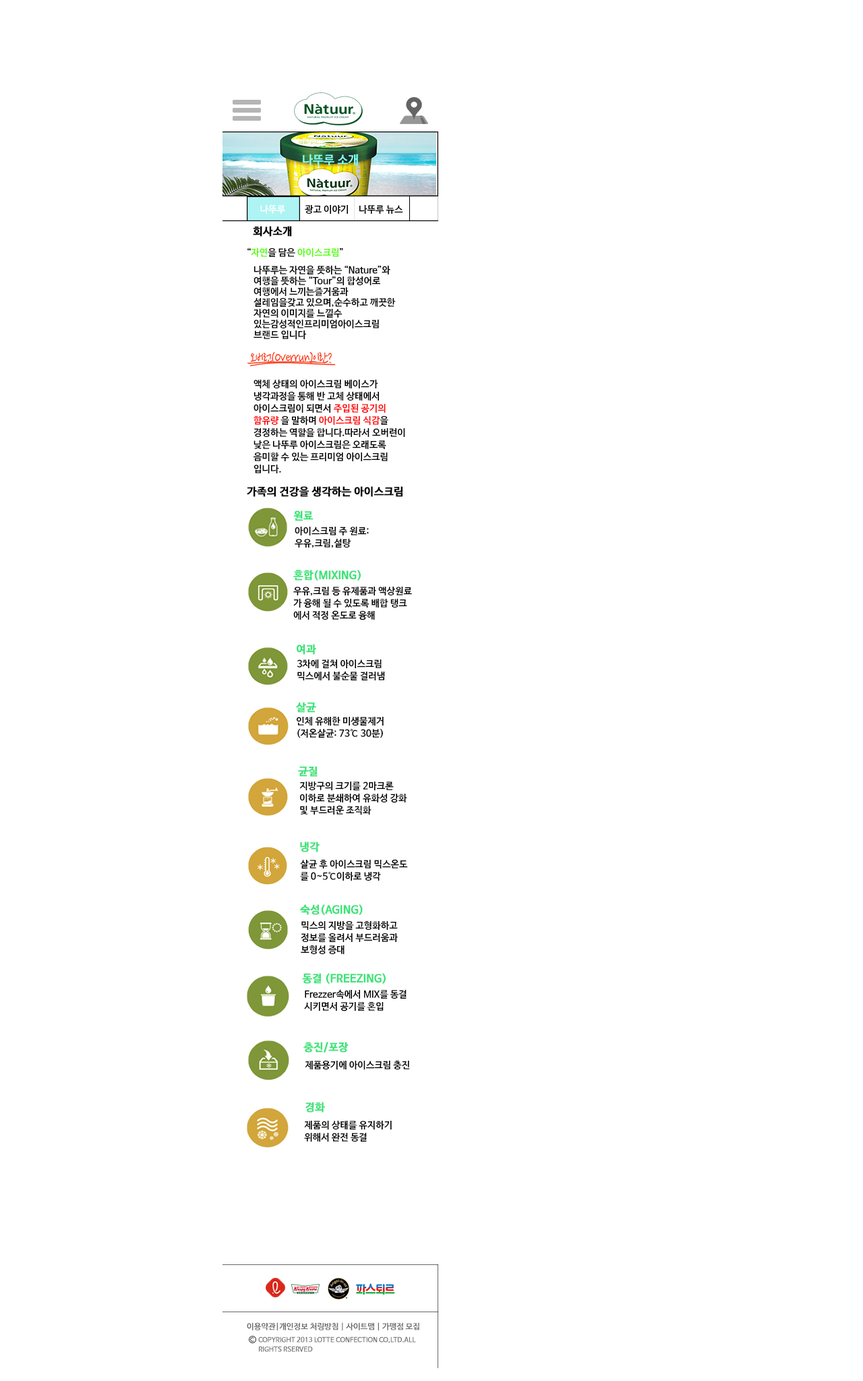
<style>
.page{position:relative;width:863px;height:1381px;background:#ffffff}
.page>*{position:absolute;margin:0}
.t1{font:12.1px "NanumBarunGothicBold";color:#84fff2}
.t2{font:9.4px "NanumBarunGothicBold";color:#ffffff}
.t3{font:9.4px "NanumBarunGothicBold";color:#000000}
.t4{font:10.8px "NanumBarunGothicBold";color:#000000;font-weight:bold}
.t5{font:9.4px "NanumBarunGothicBold";color:#54ff00}
.t6{font:9.4px/10.8px "NanumBarunGothicBold";color:#000000}
.t7{font:9.4px/12.1px "NanumBarunGothicBold";color:#000000}
.t8{font:9.4px/12.1px "NanumBarunGothicBold";color:#ff0000}
.t9{font:10.8px "NanumBarunGothicBold";color:#3de378;font-weight:bold}
.t10{font:8.1px "NanumBarunGothicBold";color:#686868}
.t11{font:6.7px/9.4px "NanumBarunGothicBold";color:#686868}
</style>
<div class="page">
<p class="t1" style="left:303px;top:154px;width:55px;height:12px">나뚜루 소개</p>
<p class="t2" style="left:260px;top:205px;width:25px;height:9px">나뚜루 소개</p>
<p class="t3" style="left:305px;top:205px;width:43px;height:9px">광고 이야기</p>
<p class="t3" style="left:359px;top:205px;width:44px;height:9px">나뚜루 뉴스</p>
<p class="t4" style="left:253px;top:226px;width:39px;height:11px">회사소개</p>
<p class="t5" style="left:248px;top:248px;width:95px;height:9px"><span class="t3">“</span>자연<span class="t3">을 담은 </span>아이스크림<span class="t3">”</span></p>
<p class="t6" style="left:254px;top:265px;width:142px;height:74px">나뚜루는 자연을 뜻하는 “Nature”와 여행을 뜻하는 “Tour”의 합성어로 여행에서 느끼는즐거움과 설레임을갖고 있으며,순수하고 깨끗한 자연의 이미지를 느낄수 있는감성적인프리미엄아이스크림 <br>브랜드 입니다</p>
<p class="t7" style="left:254px;top:380px;width:151px;height:93px">액체 상태의 아이스크림 베이스가 냉각과정을 통해 반 고체 상태에서 아이스크림이 되면서 <span class="t8">주입된 공기의 함유량 </span>을 말하며 <span class="t8">아이스크림 식감</span>을 경정하는 역할을 합니다.따라서 오버런이 낮은 나뚜루 아이스크림은 오래도록 음미할 수 있는 프리미엄 아이스크림 입니다.</p>
<p class="t4" style="left:247px;top:486px;width:156px;height:11px">가족의 건강을 생각하는 아이스크림</p>
<p class="t9" style="left:293px;top:511px;width:21px;height:10px">원료</p>
<p class="t7" style="left:295px;top:527px;width:74px;height:21px">아이스크림 주 원료:<br>우유,크림,설탕</p>
<p class="t9" style="left:293px;top:570px;width:68px;height:11px">혼합(MIXING)</p>
<p class="t7" style="left:293px;top:587px;width:119px;height:33px">우유,크림 등 유제품과 액상원료<br>가 융해 될 수 있도록 배합 탱크<br>에서 적정 온도로 융해</p>
<p class="t9" style="left:297px;top:644px;width:19px;height:11px">여과</p>
<p class="t7" style="left:297px;top:660px;width:88px;height:21px">3차에 걸쳐 아이스크림 <br>믹스에서 불순물 걸러냄</p>
<p class="t9" style="left:296px;top:702px;width:20px;height:11px">살균</p>
<p class="t7" style="left:297px;top:717px;width:87px;height:22px">인체 유해한 미생물제거 <br>(저온살균: 73℃ 30분)</p>
<p class="t9" style="left:298px;top:766px;width:20px;height:11px">균질</p>
<p class="t7" style="left:299px;top:782px;width:108px;height:33px">지방구의 크기를 2마크론 <br> 이하로 분쇄하여 유화성 강화<br> 및 부드러운 조직화</p>
<p class="t9" style="left:300px;top:842px;width:20px;height:10px">냉각</p>
<p class="t7" style="left:300px;top:859px;width:108px;height:22px">살균 후 아이스크림 믹스온도<br>를 0~5℃이하로 냉각</p>
<p class="t9" style="left:300px;top:904px;width:63px;height:11px">숙성(AGING)</p>
<p class="t7" style="left:301px;top:921px;width:97px;height:33px">믹스의 지방을 고형화하고 <br>정보를 올려서 부드러움과 <br>보형성 증대</p>
<p class="t9" style="left:302px;top:973px;width:84px;height:11px">동결 (FREEZING)</p>
<p class="t7" style="left:304px;top:989px;width:103px;height:23px">Frezzer속에서 MIX를 동결<br>시키면서 공기를 혼입</p>
<p class="t9" style="left:304px;top:1042px;width:45px;height:11px">충진/포장</p>
<p class="t3" style="left:305px;top:1061px;width:105px;height:9px">제품용기에 아이스크림 충진</p>
<p class="t9" style="left:306px;top:1102px;width:19px;height:11px">경화</p>
<p class="t7" style="left:304px;top:1121px;width:88px;height:21px">제품의 상태를 유지하기 위해서 완전 동결</p>
<p class="t10" style="left:247px;top:1323px;width:173px;height:8px">이용약관|개인정보 처링방침 | 사이트맴 | 가맹점 모집</p>
<p class="t11" style="left:258px;top:1337px;width:158px;height:15px">COPYRIGHT 2013 LOTTE CONFECTION CO,LTD.ALL RIGHTS RSERVED</p>
</div>
